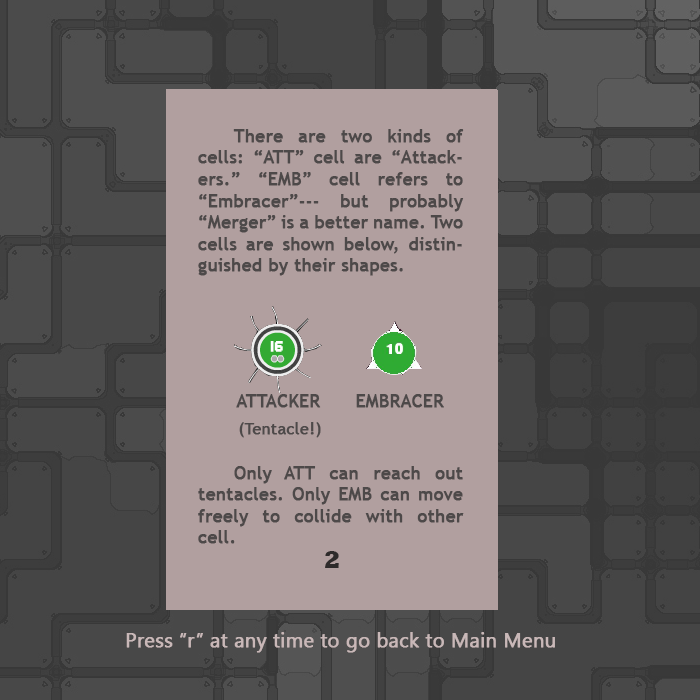
<style>
.page{position:relative;width:700px;height:700px;background:#b19f9f}
.page>*{position:absolute;margin:0}
.t1{font:18px "TrebuchetMS";color:#4d4949;font-weight:bold}
.t2{font:35px "TrajanPro-Regular";color:#4d4949;font-weight:bold;font-style:italic}
.t3{font:16px "TrebuchetMS";color:#4d4949;font-weight:bold}
.t4{font:25px "Rockwell-ExtraBold";color:#2e2b2b}
.t5{font:20px "SegoeUISymbol";color:#c9b8b8;font-weight:bold}
</style>
<div class="page">
<p class="t1" style="left:198px;top:129px;width:266px;height:415px;text-align:justify"><span class="t2"> </span>There are two kinds of cells: “ATT” cell are “Attackers.” “EMB” cell refers to  “Embracer”--- but probably “Merger” is a better name. Two cells are shown below, distinguished by their shapes.<br><br><br><br><br><br><br> Only ATT can reach out tentacles. Only EMB can move freely to collide with other cell.</p>
<p class="t3" style="left:236px;top:394px;width:85px;height:44px;text-align:justify"><span class="t1">ATTACKER<br></span>(Tentacle!)</p>
<p class="t1" style="left:356px;top:394px;width:88px;height:14px">EMBRACER</p>
<p class="t4" style="left:325px;top:551px;width:14px;height:17px">2</p>
<p class="t5" style="left:126px;top:632px;width:429px;height:21px">Press “r” at any time to go back to Main Menu</p>
</div>
